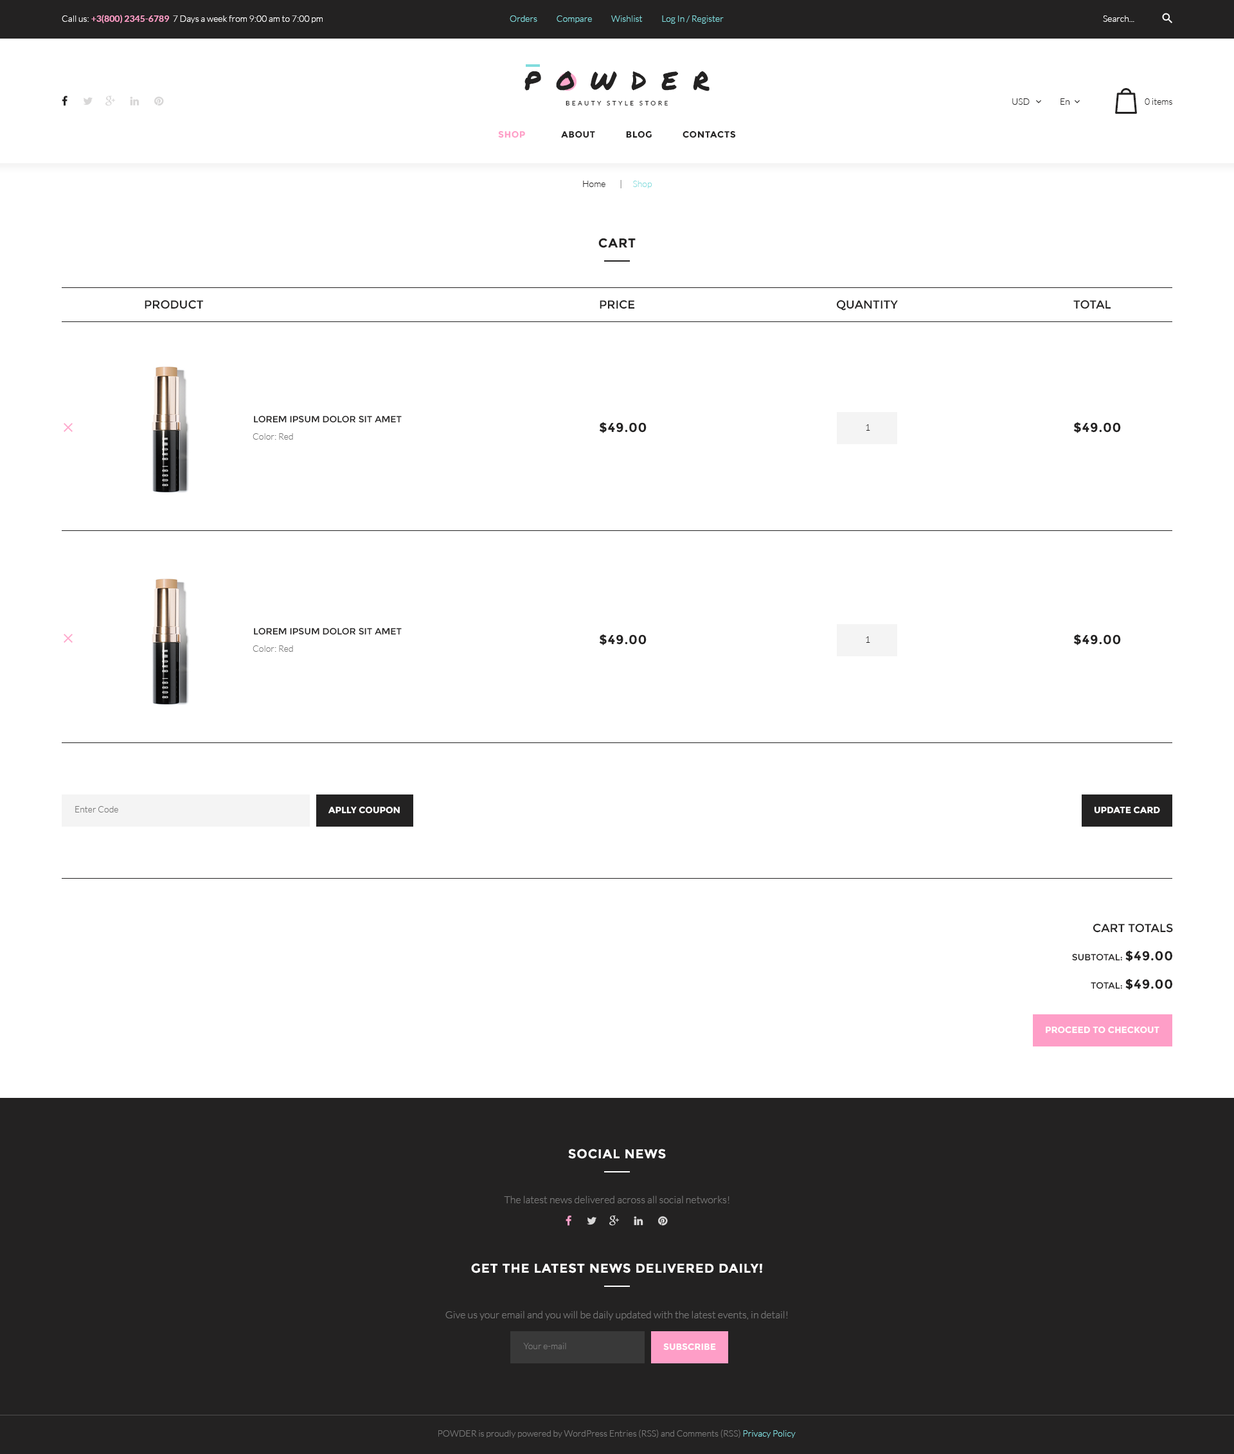
<style>
.page{position:relative;width:1234px;height:1454px;background:#ffffff}
.page>*{position:absolute;margin:0}
.t1{font:9px "Lato-Light";color:#ffffff}
.t2{font:9px "Lato-Bold";color:#fe9ec7}
.t3{font:9px "Lato-Light";color:#81dcdd}
.t4{font:25.7px "PermanentMarker";letter-spacing:0.6em;color:#232222;text-transform:uppercase}
.t5{font:6.4px "Lato-Regular";letter-spacing:0.34em;color:#232222;text-transform:uppercase}
.t6{font:9px "Lato-Light";color:#232222}
.t7{font:9px "Montserrat-Bold";letter-spacing:0.04em;color:#232222;text-transform:uppercase}
.t8{font:9px "Montserrat-Bold";letter-spacing:0.04em;color:#fe9ec7;text-transform:uppercase}
.t9{font:12.9px "Montserrat-Bold";letter-spacing:0.04em;color:#232222;text-transform:uppercase}
.t10{font:11.6px "Montserrat-Regular";color:#232222;text-transform:uppercase}
.t11{font:9px "Montserrat-Regular";color:#232222;text-transform:uppercase}
.t12{font:9px "Lato-Light";color:#777777}
.t13{font:9px "Montserrat-Bold";color:#ffffff;text-transform:uppercase}
.t14{font:12.9px "Montserrat-Bold";letter-spacing:0.04em;color:#ffffff;text-transform:uppercase}
.t15{font:10.3px "Lato-Light";color:#777777}
.t16{font:9px "Lato-Light";color:#777777;text-transform:uppercase}
</style>
<div class="page">
<p class="t1" style="left:62px;top:15px;width:261px;height:9px">Call us: <span class="t2">+3(800) 2345-6789 </span> 7 Days a week from 9:00 am to 7:00 pm</p>
<p class="t3" style="left:510px;top:15px;width:214px;height:9px">Orders           Compare           Wishlist           Log In / Register</p>
<p class="t1" style="left:1103px;top:15px;width:32px;height:7px">Search...</p>
<p class="t4" style="left:525px;top:71px;width:185px;height:20px">powder</p>
<p class="t5" style="left:566px;top:101px;width:102px;height:4px">Beauty Style Store</p>
<p class="t6" style="left:1013px;top:98px;width:17px;height:7px">USD</p>
<p class="t6" style="left:1061px;top:98px;width:9px;height:7px">En</p>
<p class="t6" style="left:1145px;top:98px;width:28px;height:7px">0 items</p>
<p class="t7" style="left:498px;top:130px;width:238px;height:8px"><span class="t8">Shop      </span>       About           Blog           Contacts</p>
<p class="t6" style="left:583px;top:180px;width:69px;height:8px">Home        |      <span class="t3">Shop</span></p>
<p class="t9" style="left:598px;top:238px;width:38px;height:10px">Cart</p>
<p class="t10" style="left:145px;top:300px;width:59px;height:9px">Product</p>
<p class="t10" style="left:600px;top:300px;width:35px;height:9px">Price</p>
<p class="t10" style="left:836px;top:300px;width:62px;height:10px">Quantity</p>
<p class="t10" style="left:1074px;top:300px;width:38px;height:9px">Total</p>
<p class="t11" style="left:254px;top:415px;width:148px;height:8px">Lorem ipsum dolor sit amet</p>
<p class="t9" style="left:599px;top:422px;width:48px;height:11px">$49.00</p>
<p class="t6" style="left:866px;top:424px;width:4px;height:7px">1</p>
<p class="t9" style="left:1074px;top:422px;width:47px;height:11px">$49.00</p>
<p class="t12" style="left:253px;top:433px;width:40px;height:7px">Color: Red</p>
<p class="t11" style="left:254px;top:627px;width:148px;height:8px">Lorem ipsum dolor sit amet</p>
<p class="t9" style="left:599px;top:634px;width:48px;height:11px">$49.00</p>
<p class="t6" style="left:866px;top:636px;width:4px;height:7px">1</p>
<p class="t9" style="left:1074px;top:634px;width:47px;height:11px">$49.00</p>
<p class="t12" style="left:253px;top:645px;width:40px;height:7px">Color: Red</p>
<p class="t12" style="left:75px;top:806px;width:43px;height:7px">Enter Code</p>
<p class="t13" style="left:328px;top:806px;width:72px;height:8px">Aplly coupon</p>
<p class="t13" style="left:1094px;top:806px;width:66px;height:8px">Update card</p>
<p class="t10" style="left:1093px;top:924px;width:80px;height:9px">Cart Totals</p>
<p class="t11" style="left:1072px;top:951px;width:101px;height:11px">Subtotal: <span class="t9">$49.00</span></p>
<p class="t11" style="left:1091px;top:979px;width:82px;height:11px">total: <span class="t9">$49.00</span></p>
<p class="t13" style="left:1046px;top:1026px;width:114px;height:8px">Proceed to Checkout</p>
<p class="t14" style="left:568px;top:1149px;width:98px;height:10px">Social news</p>
<p class="t15" style="left:504px;top:1196px;width:226px;height:7px">The latest news delivered across all social networks!</p>
<p class="t14" style="left:471px;top:1263px;width:291px;height:11px">Get the latest news delivered daily!</p>
<p class="t15" style="left:446px;top:1311px;width:342px;height:9px">Give us your email and you will be daily updated with the latest events, in detail!</p>
<p class="t12" style="left:523px;top:1343px;width:43px;height:6px">Your e-mail</p>
<p class="t13" style="left:663px;top:1343px;width:53px;height:8px">Subscribe</p>
<p class="t12" style="left:438px;top:1430px;width:358px;height:8px"><span class="t16">powder</span> is proudly powered by WordPress Entries (RSS) and Comments (RSS) <span class="t3">Privacy Policy</span></p>
</div>
